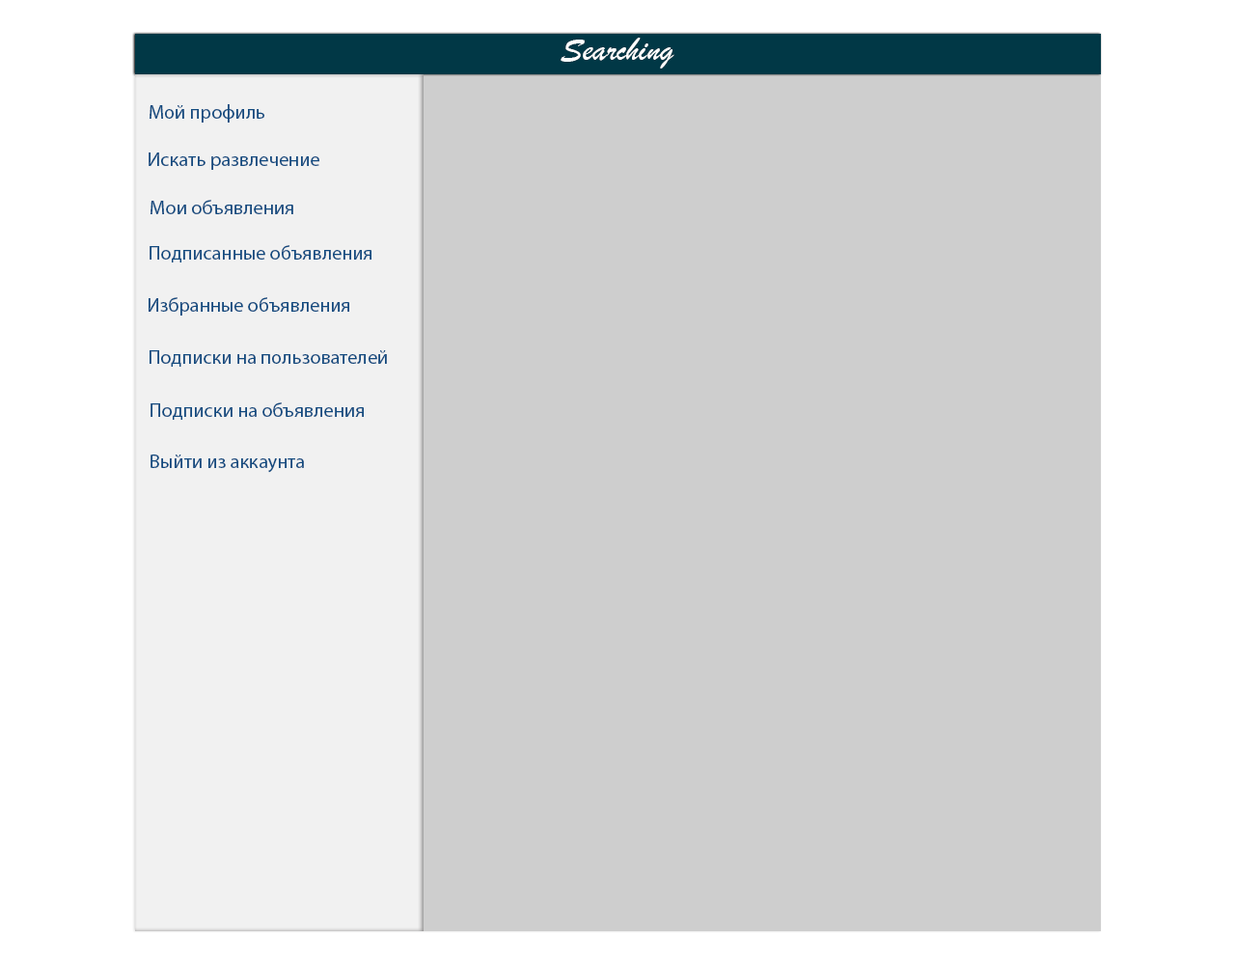
<style>
.page{position:relative;width:1235px;height:965px;background:#cecece}
.page>*{position:absolute;margin:0}
.t1{font:34.3px "BrushScriptMT";color:#ffffff}
.t2{font:11.6px "BrushScriptMT";color:#ffffff}
.t3{font:19.6px "MyriadPro-Regular";color:#114a7f}
</style>
<div class="page">
<p class="t1" style="left:561px;top:38px;width:114px;height:31px"><span class="t2">             </span>Searching</p>
<p class="t3" style="left:150px;top:104px;width:114px;height:19px">Мой профиль</p>
<p class="t3" style="left:149px;top:152px;width:170px;height:18px">Искать развлечение</p>
<p class="t3" style="left:151px;top:200px;width:142px;height:14px">Мои объявления</p>
<p class="t3" style="left:150px;top:245px;width:222px;height:18px">Подписанные объявления</p>
<p class="t3" style="left:149px;top:297px;width:200px;height:19px">Избранные объявления</p>
<p class="t3" style="left:150px;top:350px;width:237px;height:17px">Подписки на пользователей</p>
<p class="t3" style="left:151px;top:402px;width:213px;height:18px">Подписки на объявления</p>
<p class="t3" style="left:151px;top:455px;width:153px;height:18px">Выйти из аккаунта</p>
</div>
